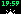
<style>
.page{position:relative;width:21px;height:14px;background:#000000}
.page>*{position:absolute;margin:0}
.t1{font:9.3px "Raanana";color:#00ff66}
</style>
<div class="page">
<p class="t1" style="left:2px;top:1px;width:17px;height:5px">19:59</p>
</div>
